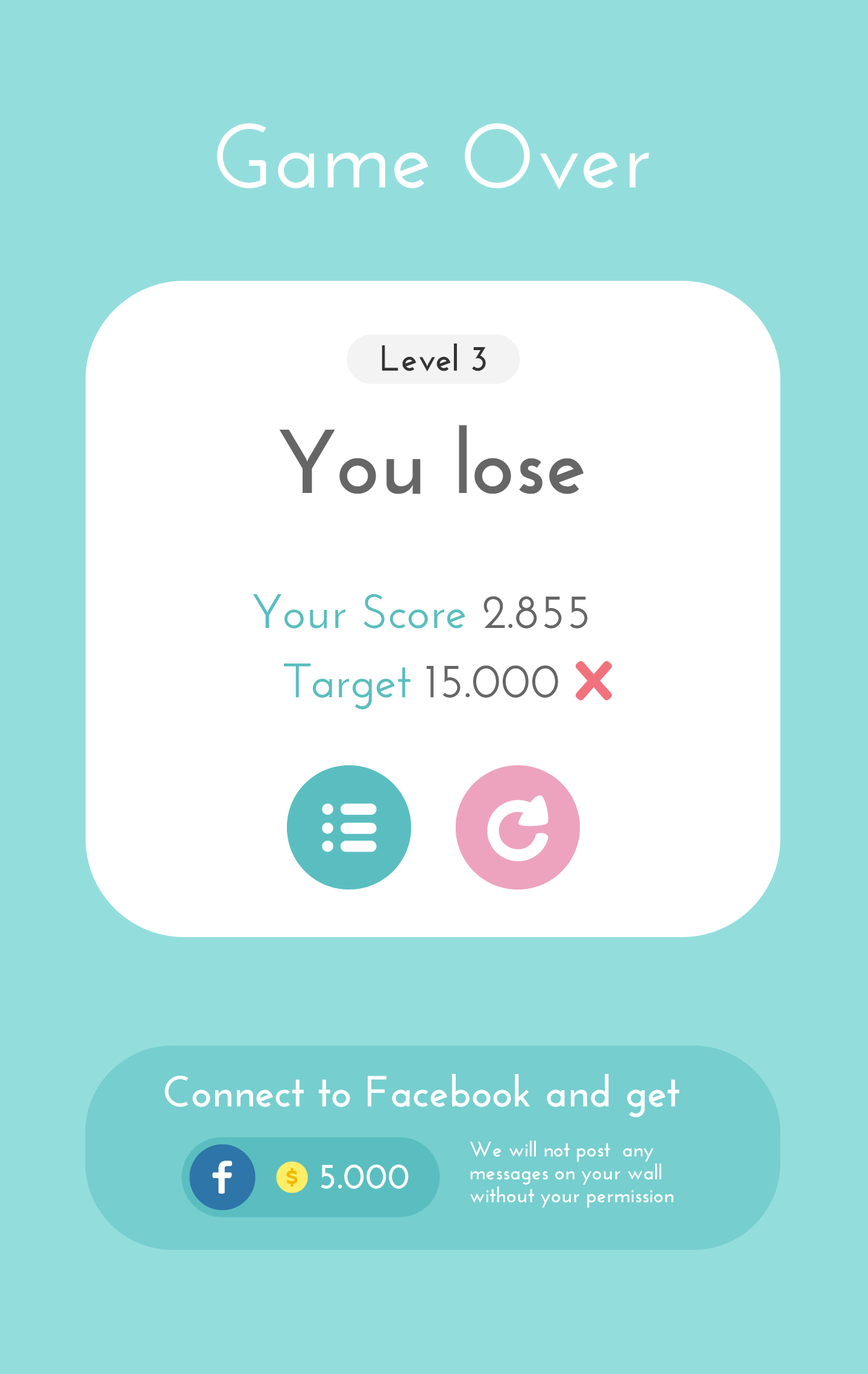
<style>
.page{position:relative;width:868px;height:1374px;background:#93dedd}
.page>*{position:absolute;margin:0}
.t1{font:90.4px "JosefinSans-SemiBold";color:#ffffff}
.t2{font:36.2px "JosefinSans-Bold";color:#333333}
.t3{font:90.4px "JosefinSans-Bold";color:#666666}
.t4{font:48.2px "JosefinSans-SemiBold";color:#59bebf}
.t5{font:48.2px "JosefinSans-SemiBold";color:#666666}
.t6{font:43.4px "JosefinSans-Bold";color:#ffffff}
.t7{font:21.1px/22.8px "JosefinSans-Bold";color:#ffffff}
.t8{font:36.2px "JosefinSans-Bold";color:#ffffff}
</style>
<div class="page">
<p class="t1" style="left:217px;top:123px;width:432px;height:67px">Game Over</p>
<p class="t2" style="left:381px;top:344px;width:105px;height:28px">Level 3</p>
<p class="t3" style="left:279px;top:425px;width:304px;height:69px">You lose</p>
<p class="t4" style="left:253px;top:594px;width:335px;height:35px">Your Score<span class="t5"> 2.855</span></p>
<p class="t4" style="left:284px;top:664px;width:274px;height:45px">Target<span class="t5"> 15.000</span></p>
<p class="t6" style="left:165px;top:1074px;width:514px;height:43px">Connect to Facebook and get</p>
<p class="t7" style="left:470px;top:1140px;width:203px;height:68px">We will not post  any messages on your wall  without your permission</p>
<p class="t8" style="left:321px;top:1164px;width:88px;height:25px">5.000</p>
</div>
